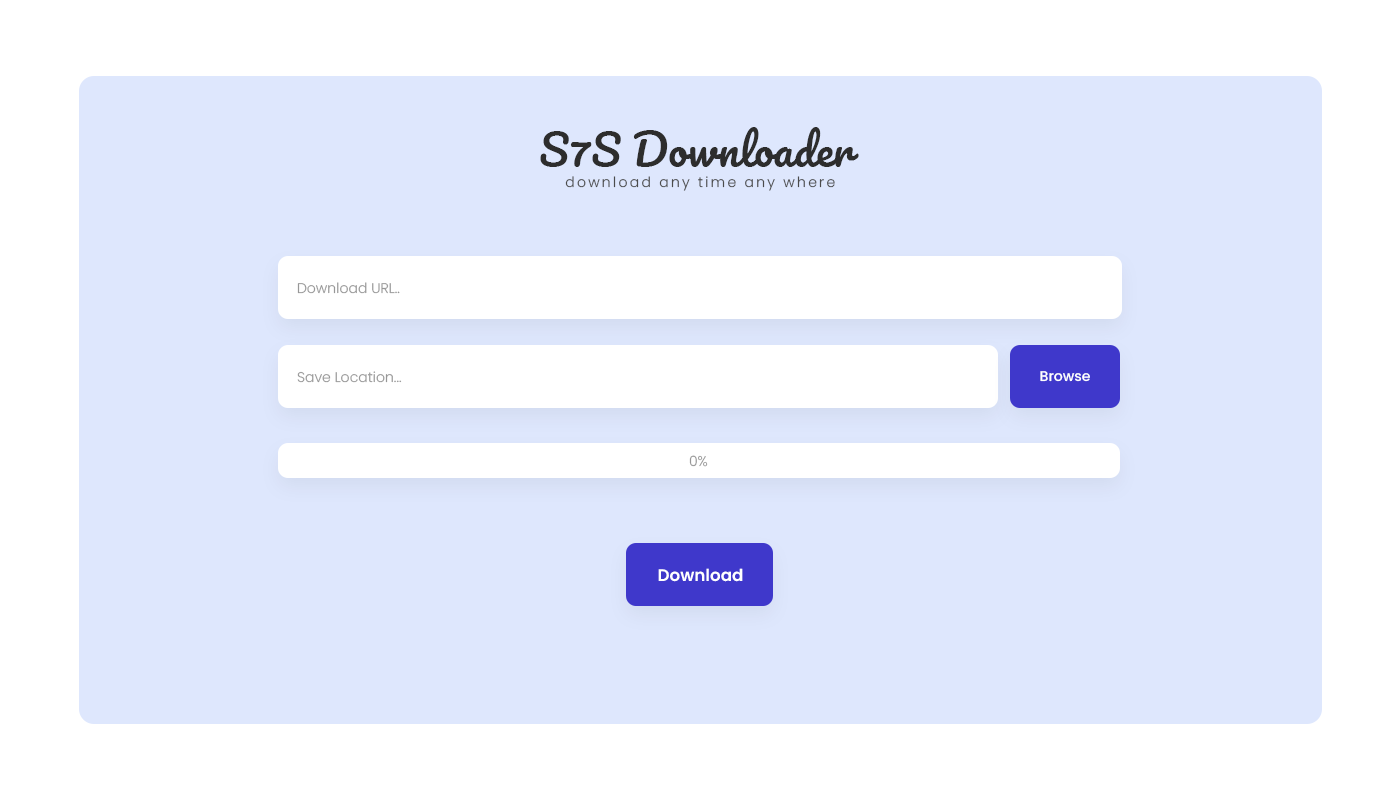
<style>
.page{position:relative;width:1400px;height:800px;background:#dee7fd}
.page>*{position:absolute;margin:0}
.t1{font:43.2px "Pacifico-Regular";color:#2d2d2d}
.t2{font:14px "Poppins-Light";letter-spacing:0.16em;color:#4b4b4b}
.t3{font:14px "Poppins-Light";color:#979797}
.t4{font:14px "Poppins-Medium";color:#ffffff}
.t5{font:16.7px "Poppins-SemiBold";color:#ffffff}
</style>
<div class="page">
<p class="t1" style="left:540px;top:127px;width:319px;height:40px">S7S Downloader</p>
<p class="t2" style="left:565px;top:176px;width:270px;height:15px">download any time any where</p>
<p class="t3" style="left:297px;top:282px;width:103px;height:12px">Download URL..</p>
<p class="t3" style="left:297px;top:371px;width:105px;height:12px">Save Location...</p>
<p class="t4" style="left:1040px;top:371px;width:50px;height:11px">Browse</p>
<p class="t3" style="left:689px;top:455px;width:19px;height:12px">0%</p>
<p class="t5" style="left:658px;top:568px;width:85px;height:14px">Download</p>
</div>
